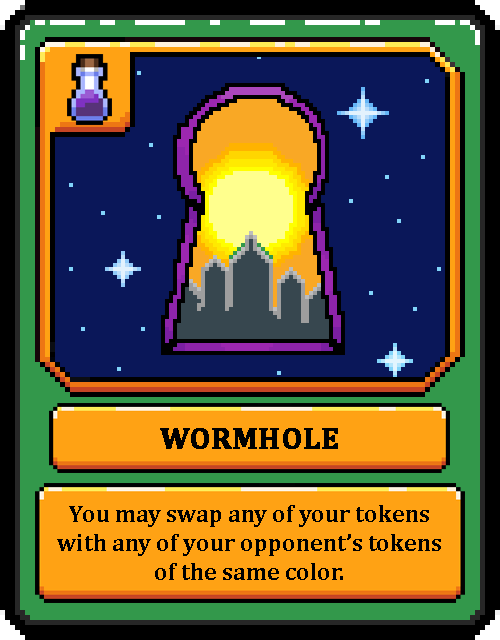
<style>
.page{position:relative;width:500px;height:640px;background:#0a1759}
.page>*{position:absolute;margin:0}
.t1{font:30px "Cambria-Bold";color:#000000;text-transform:uppercase;font-weight:bold}
.t2{font:24px "Cambria-Bold";color:#000000}
</style>
<div class="page">
<p class="t1" style="left:160px;top:428px;width:178px;height:21px">Wormhole</p>
<p class="t2" style="left:57px;top:505px;width:384px;height:75px;text-align:center">You may swap any of your tokens with any of your opponent’s tokens of the same color.</p>
</div>
